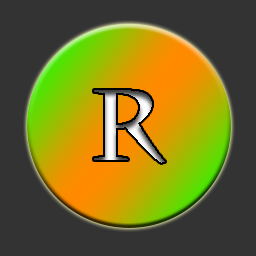
<style>
.page{position:relative;width:256px;height:256px;background:#333333}
.page>*{position:absolute;margin:0}
.t1{font:100px "CharlemagneStd-Bold"}
</style>
<div class="page">
<p class="t1" style="left:94px;top:90px;width:71px;height:73px">R</p>
</div>
